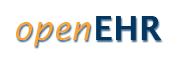
<style>
.page{position:relative;width:180px;height:60px;background:#ffffff}
.page>*{position:absolute;margin:0}
.t1{font:33.3px "LucidaSans-Demi";color:#00355f}
.t2{font:33.3px "LucidaSans-Italic";color:#f9a338}
</style>
<div class="page">
<p class="t1" style="left:96px;top:16px;width:66px;height:24px">EHR</p>
<p class="t2" style="left:16px;top:22px;width:75px;height:24px">open</p>
</div>
